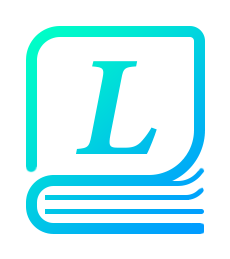
<style>
.page{position:relative;width:230px;height:259px;background:#ffffff}
.page>*{position:absolute;margin:0}
.t1{font:142.7px "MinionConceptItalic-BoldItalic";letter-spacing:-0.05em;color:#00d5de;text-transform:uppercase}
</style>
<div class="page">
<p class="t1" style="left:76px;top:61px;width:81px;height:93px">L</p>
</div>
